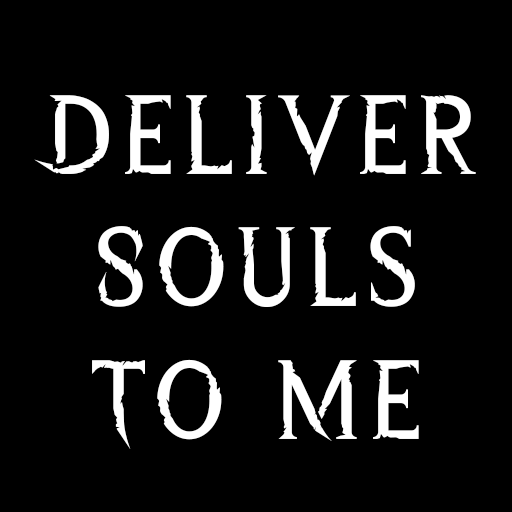
<style>
.page{position:relative;width:512px;height:512px;background:#000000}
.page>*{position:absolute;margin:0}
.t1{font:110.8px "WreckedShipRegular";letter-spacing:0.05em;color:#ffffff}
</style>
<div class="page">
<p class="t1" style="left:34px;top:95px;width:442px;height:354px;text-align:center">Deliver<br>Souls<br>To Me</p>
</div>
